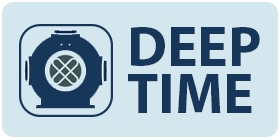
<style>
.page{position:relative;width:280px;height:140px;background:#d4e7ef}
.page>*{position:absolute;margin:0}
.t1{font:56.9px/47.2px "MyriadPro-Bold";color:#163759}
</style>
<div class="page">
<p class="t1" style="left:128px;top:27px;width:132px;height:86px">DEEP<br>TIME</p>
</div>
